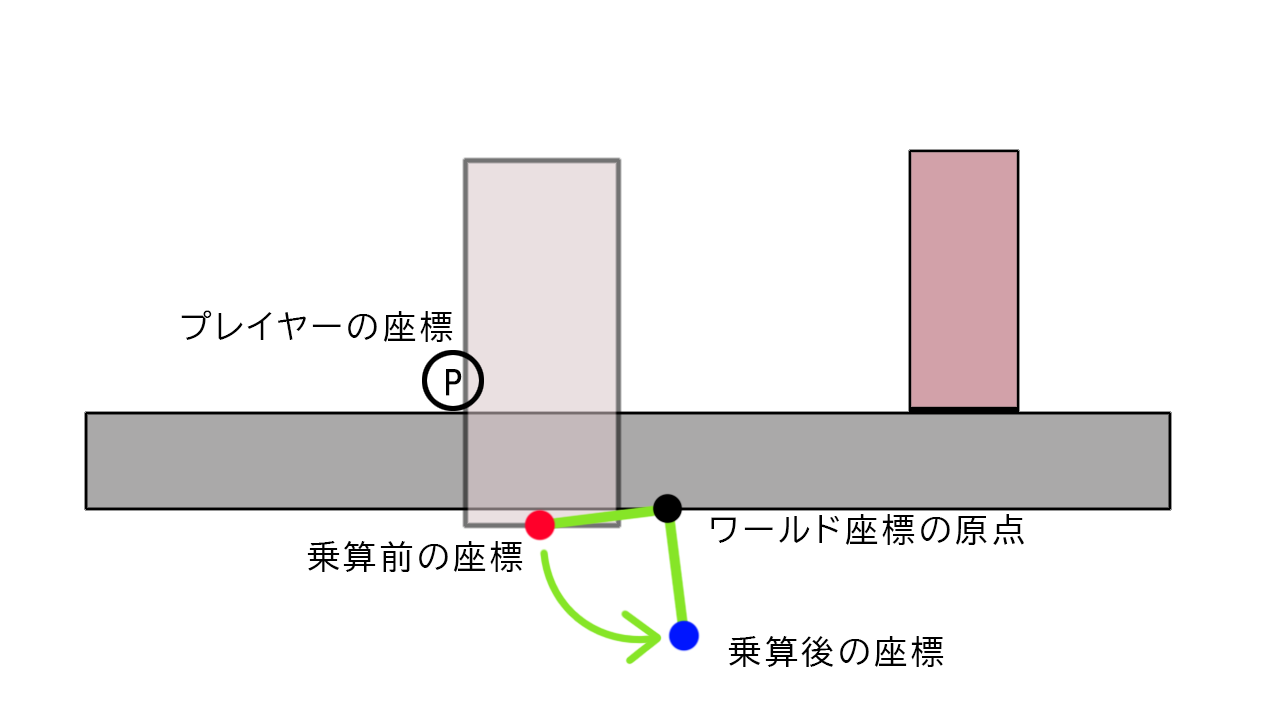
<style>
.page{position:relative;width:1280px;height:720px;background:#ffffff}
.page>*{position:absolute;margin:0}
.t1{font:33.3px "BIZ-UDPGothic";letter-spacing:0.1em;color:#000000}
.t2{font:33.3px "HGPGothicE";letter-spacing:0.1em;color:#000000}
</style>
<div class="page">
<p class="t1" style="left:181px;top:310px;width:272px;height:32px">プレイヤーの座標</p>
<p class="t2" style="left:446px;top:369px;width:16px;height:27px">P</p>
<p class="t1" style="left:711px;top:514px;width:313px;height:31px">ワールド座標の原点</p>
<p class="t1" style="left:307px;top:541px;width:216px;height:31px">乗算前の座標</p>
<p class="t1" style="left:728px;top:636px;width:216px;height:31px">乗算後の座標</p>
</div>
